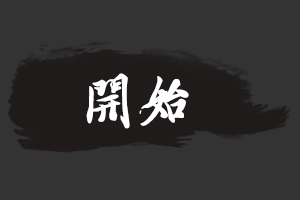
<style>
.page{position:relative;width:300px;height:200px;background:#333333}
.page>*{position:absolute;margin:0}
.t1{font:58.3px "SCFwxz";color:#ffffff;font-weight:bold}
</style>
<div class="page">
<p class="t1" style="left:86px;top:73px;width:103px;height:56px">開始</p>
</div>
